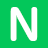
<style>
.page{position:relative;width:48px;height:48px;background:#03c75a}
.page>*{position:absolute;margin:0}
.t1{font:47px "NanumSquareRoundEB";letter-spacing:-0.01em;color:#ffffff}
</style>
<div class="page">
<p class="t1" style="left:10px;top:7px;width:28px;height:34px">N</p>
</div>
